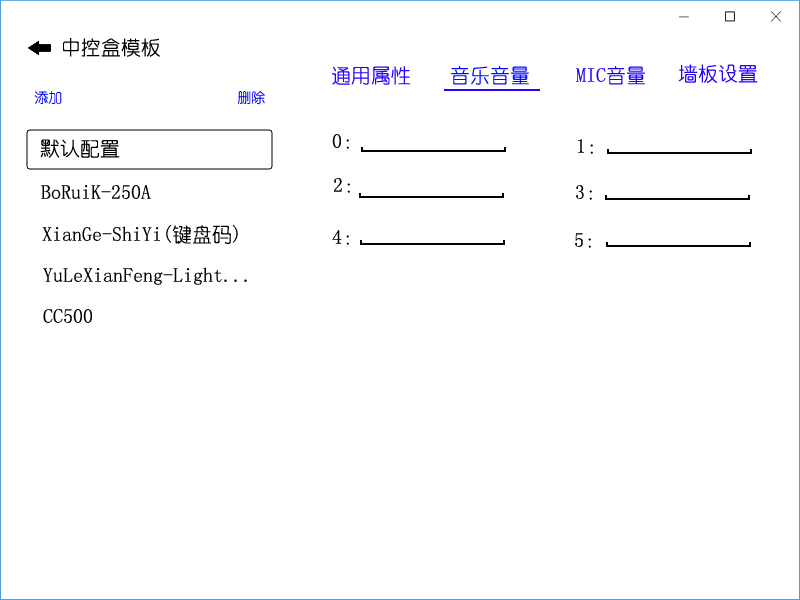
<style>
.page{position:relative;width:800px;height:600px;background:#ffffff}
.page>*{position:absolute;margin:0}
.t1{font:20px "YouYuan";color:#010101}
.t2{font:20px "YouYuan";color:#2501ff}
.t3{font:20px "YouYuan";color:#000cff}
.t4{font:20px "YouYuan";color:#1f01fd}
.t5{font:14px "YouYuan";color:#0000fe}
</style>
<div class="page">
<p class="t1" style="left:63px;top:38px;width:97px;height:19px">中控盒模板</p>
<p class="t2" style="left:678px;top:64px;width:80px;height:19px">墙板设置</p>
<p class="t2" style="left:332px;top:66px;width:78px;height:19px">通用属性</p>
<p class="t3" style="left:451px;top:66px;width:78px;height:19px">音乐音量</p>
<p class="t4" style="left:576px;top:66px;width:69px;height:19px">MIC音量</p>
<p class="t5" style="left:34px;top:91px;width:28px;height:13px">添加</p>
<p class="t5" style="left:238px;top:91px;width:27px;height:14px">删除</p>
<p class="t1" style="left:332px;top:134px;width:17px;height:15px">0：</p>
<p class="t1" style="left:40px;top:139px;width:80px;height:19px">默认配置</p>
<p class="t1" style="left:578px;top:139px;width:15px;height:15px">1：</p>
<p class="t1" style="left:41px;top:184px;width:110px;height:15px">BoRuiK-250A</p>
<p class="t1" style="left:334px;top:178px;width:16px;height:15px">2：</p>
<p class="t1" style="left:576px;top:185px;width:16px;height:15px">3：</p>
<p class="t1" style="left:42px;top:224px;width:196px;height:20px">XianGe-ShiYi(键盘码)</p>
<p class="t1" style="left:332px;top:230px;width:17px;height:15px">4：</p>
<p class="t1" style="left:575px;top:233px;width:16px;height:15px">5：</p>
<p class="t1" style="left:43px;top:267px;width:204px;height:18px">YuLeXianFeng-Light...</p>
<p class="t1" style="left:43px;top:309px;width:49px;height:14px">CC500</p>
</div>
